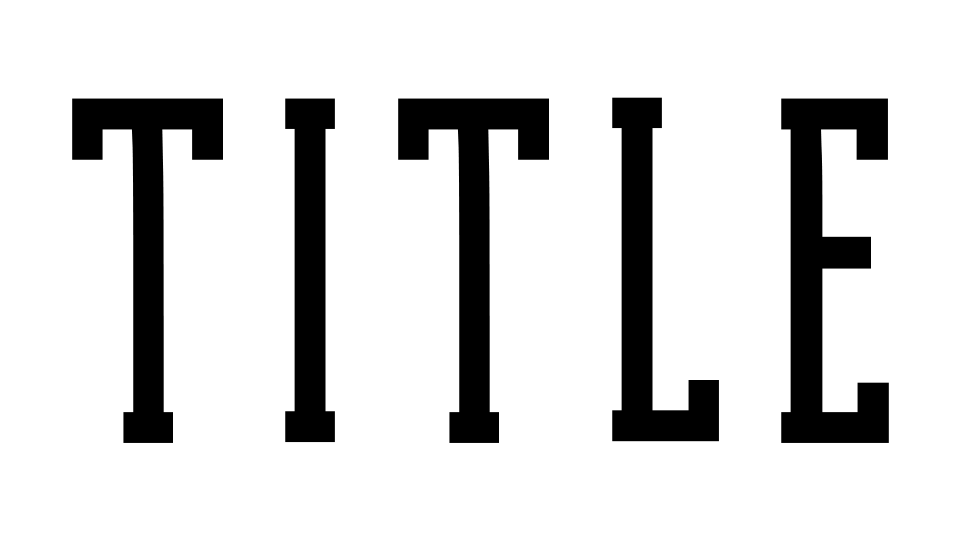
<style>
.page{position:relative;width:960px;height:540px;background:#ffffff}
.page>*{position:absolute;margin:0}
.t1{font:445.8px "DyoblogFont-Regular";letter-spacing:0.04em;color:#000000}
</style>
<div class="page">
<p class="t1" style="left:72px;top:97px;width:817px;height:346px">TITLE</p>
</div>
